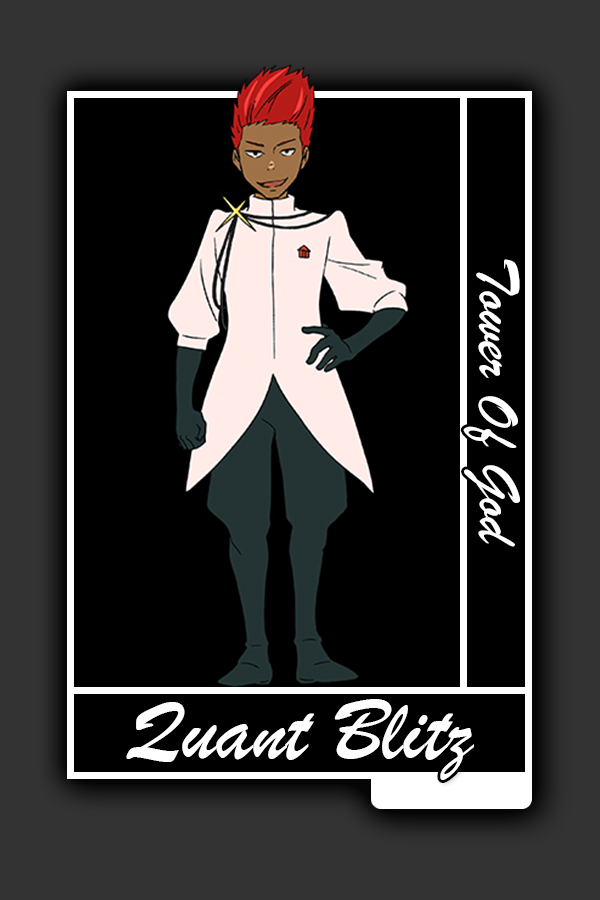
<style>
.page{position:relative;width:600px;height:900px;background:#000000}
.page>*{position:absolute;margin:0}
.t1{font:61.5px "BrushScriptMT";color:#ffffff}
.t2{font:89.7px "BrushScriptMT";color:#ffffff}
</style>
<div class="page">
<p class="t1" style="left:463px;top:259px;width:57px;height:288px;rotate:90deg">Tower Of God</p>
<p class="t2" style="left:126px;top:699px;width:348px;height:81px">Quant Blitz</p>
</div>
